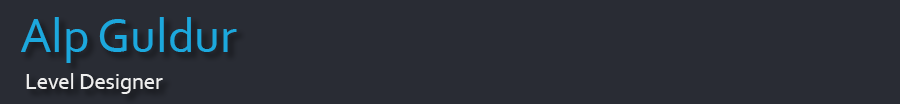
<style>
.page{position:relative;width:900px;height:104px;background:#292c34}
.page>*{position:absolute;margin:0}
.t1{font:49.7px "Corbel";color:#1ca8dd}
.t2{font:22.5px "Corbel";color:#eeeeee}
</style>
<div class="page">
<p class="t1" style="left:21px;top:17px;width:216px;height:46px">Alp Guldur</p>
<p class="t2" style="left:26px;top:73px;width:137px;height:21px">Level Designer</p>
</div>
